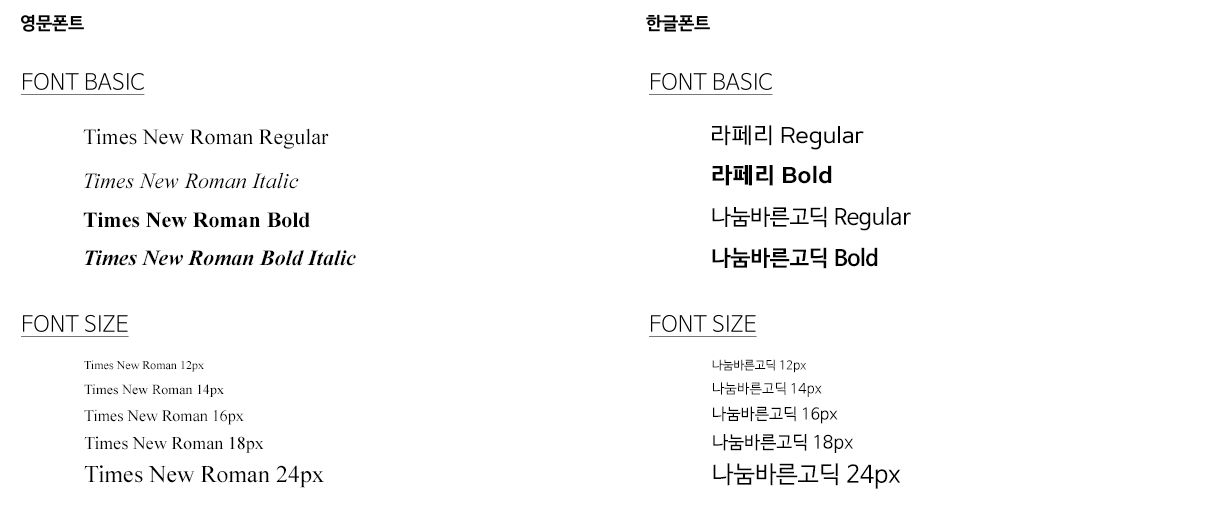
<style>
.page{position:relative;width:1228px;height:520px;background:#ffffff}
.page>*{position:absolute;margin:0}
.t1{font:22px "LeferiBaseType-Regular";color:#000000}
.t2{font:22px "TimesNewRomanPSMT";color:#000000}
.t3{font:22px "TimesNewRomanPS-ItalicMT";color:#000000}
.t4{font:22px "LeferiBaseType-Bold";color:#000000}
.t5{font:22px "NanumBarunGothic";color:#000000}
.t6{font:22px "TimesNewRomanPS-BoldMT";color:#000000}
.t7{font:22px "TimesNewRomanPS-BoldItalicMT";color:#000000}
.t8{font:22px "NanumBarunGothicBold";color:#000000}
.t9{font:12px "TimesNewRomanPSMT";color:#000000}
.t10{font:12px "NanumBarunGothic";color:#000000}
.t11{font:14px "TimesNewRomanPSMT";color:#000000}
.t12{font:14px "NanumBarunGothic";color:#000000}
.t13{font:16px "TimesNewRomanPSMT";color:#000000}
.t14{font:16px "NanumBarunGothic";color:#000000}
.t15{font:18px "TimesNewRomanPSMT";color:#000000}
.t16{font:18px "NanumBarunGothic";color:#000000}
.t17{font:24px "TimesNewRomanPSMT";color:#000000}
.t18{font:24px "NanumBarunGothic";color:#000000}
</style>
<div class="page">
<p class="t1" style="left:712px;top:125px;width:152px;height:25px">라페리 Regular</p>
<p class="t2" style="left:83px;top:128px;width:246px;height:21px">Times New Roman Regular</p>
<p class="t3" style="left:84px;top:172px;width:215px;height:17px">Times New Roman Italic</p>
<p class="t4" style="left:712px;top:165px;width:120px;height:21px">라페리 Bold</p>
<p class="t5" style="left:712px;top:206px;width:199px;height:25px">나눔바른고딕 Regular</p>
<p class="t6" style="left:83px;top:212px;width:227px;height:16px">Times New Roman Bold</p>
<p class="t7" style="left:84px;top:250px;width:272px;height:16px">Times New Roman Bold Italic</p>
<p class="t8" style="left:712px;top:247px;width:166px;height:22px">나눔바른고딕 Bold</p>
<p class="t9" style="left:84px;top:360px;width:120px;height:12px">Times New Roman 12px</p>
<p class="t10" style="left:712px;top:359px;width:94px;height:14px">나눔바른고딕 12px</p>
<p class="t11" style="left:84px;top:384px;width:140px;height:13px">Times New Roman 14px</p>
<p class="t12" style="left:713px;top:382px;width:109px;height:15px">나눔바른고딕 14px</p>
<p class="t13" style="left:84px;top:409px;width:160px;height:16px">Times New Roman 16px</p>
<p class="t14" style="left:713px;top:406px;width:125px;height:18px">나눔바른고딕 16px</p>
<p class="t15" style="left:84px;top:436px;width:180px;height:17px">Times New Roman 18px</p>
<p class="t16" style="left:713px;top:434px;width:140px;height:19px">나눔바른고딕 18px</p>
<p class="t17" style="left:84px;top:465px;width:240px;height:23px">Times New Roman 24px</p>
<p class="t18" style="left:713px;top:463px;width:188px;height:26px">나눔바른고딕 24px</p>
</div>
